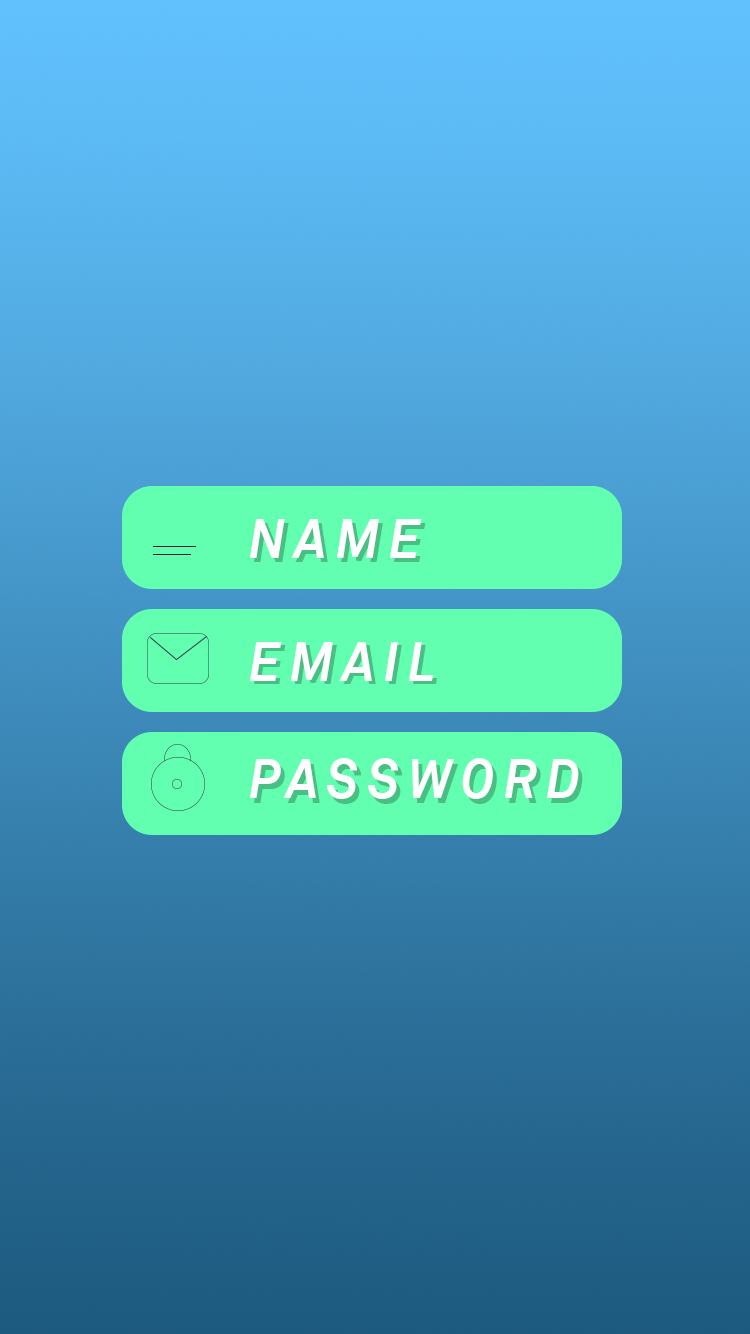
<style>
.page{position:relative;width:750px;height:1334px}
.page>*{position:absolute;margin:0}
.t1{font:55px "Akkurat-BoldItalic";letter-spacing:0.185em;color:#ffffff;scale:0.91 1}
.t2{font:55px "Akkurat-BoldItalic";letter-spacing:0.185em;scale:0.91 1}
.t3{font:55px "Akkurat-BoldItalic";letter-spacing:0.186em;color:#ffffff;scale:0.91 1}
.t4{font:55px "Akkurat-BoldItalic";letter-spacing:0.186em;scale:0.91 1}
</style>
<div class="page">
<p class="t1" style="left:250px;top:519px;width:172px;height:39px">NAME</p>
<p class="t2" style="left:254px;top:523px;width:172px;height:39px">NAME</p>
<p class="t3" style="left:250px;top:642px;width:183px;height:39px">EMAIL</p>
<p class="t4" style="left:254px;top:645px;width:183px;height:39px">EMAIL</p>
<p class="t1" style="left:250px;top:758px;width:329px;height:41px">PASSWORD</p>
<p class="t2" style="left:254px;top:763px;width:329px;height:41px">PASSWORD</p>
</div>
